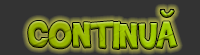
<style>
.page{position:relative;width:200px;height:55px;background:#333333}
.page>*{position:absolute;margin:0}
.t1{font:46px "Brady-Bunch"}
</style>
<div class="page">
<p class="t1" style="left:28px;top:21px;width:149px;height:28px">CONTINUA</p>
</div>
